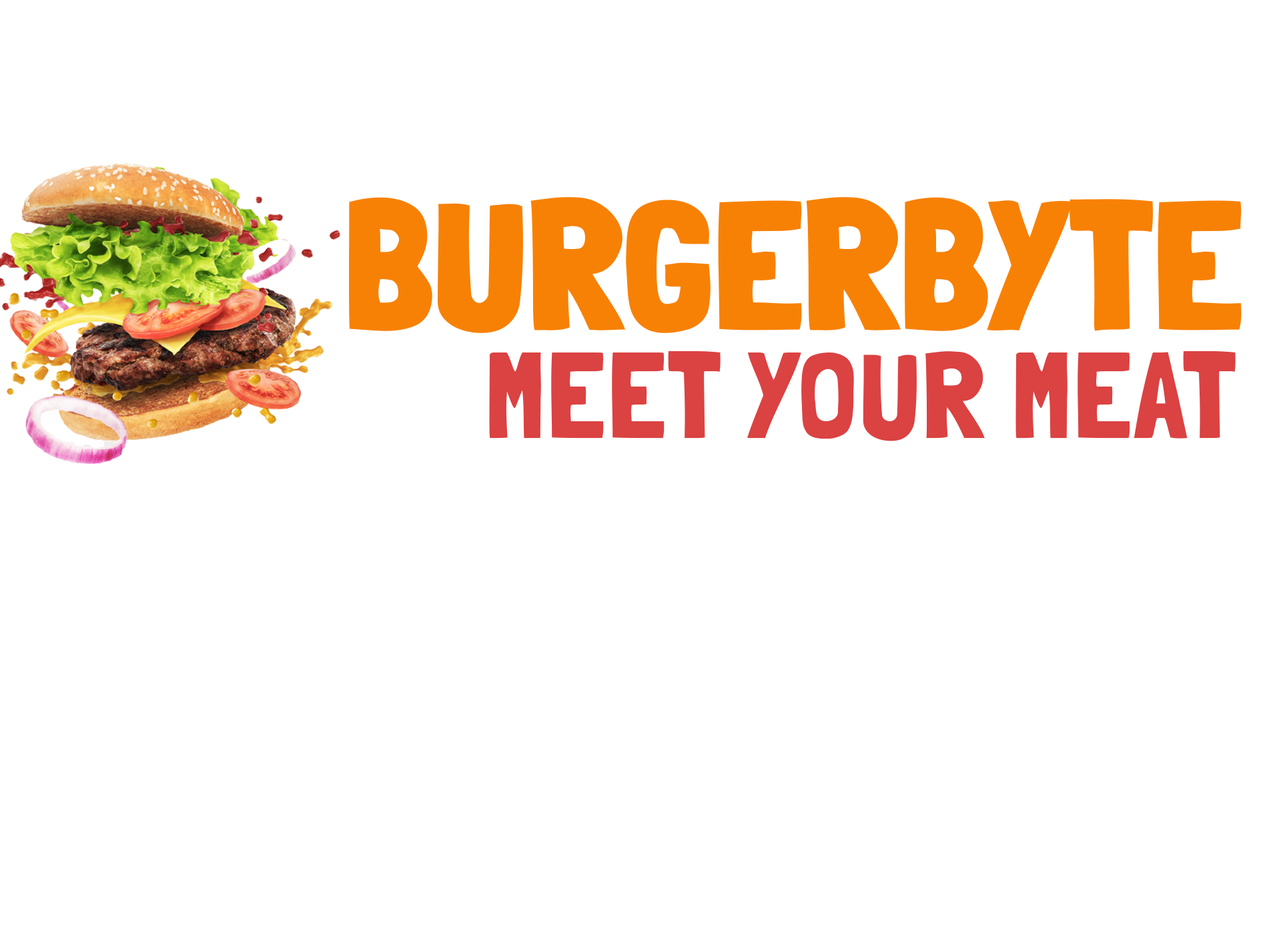
<style>
.page{position:relative;width:1261px;height:946px;background:#ffffff}
.page>*{position:absolute;margin:0}
.t1{font:182.7px "LondrinaSolid-Black";letter-spacing:0.01em;color:#f78105}
.t2{font:122.5px "LondrinaSolid-Regular";letter-spacing:0.01em;color:#db4242}
</style>
<div class="page">
<p class="t1" style="left:349px;top:197px;width:893px;height:136px">BURGERBYTE</p>
<p class="t2" style="left:489px;top:351px;width:747px;height:90px">MEET YOUR MEAT</p>
</div>
